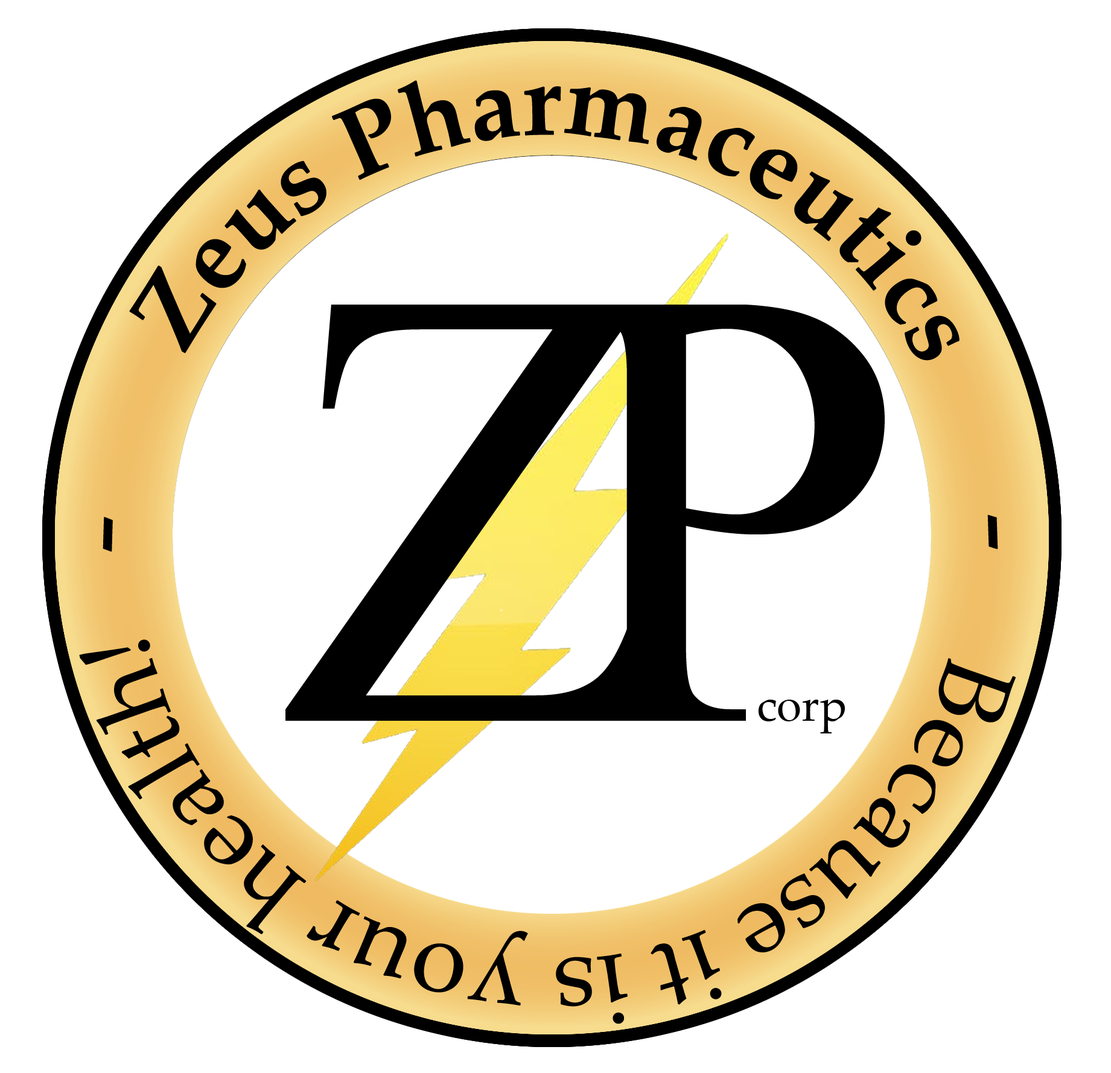
<style>
.page{position:relative;width:1111px;height:1073px;background:#ffffff}
.page>*{position:absolute;margin:0}
.t1{font:100.6px "PalatinoLinotype-Roman";color:#000000}
.t2{font:100.6px "PalatinoLinotype-Bold";color:#000000}
.t3{font:120.7px "PalatinoLinotype-Roman";color:#000000}
.t4{font:45.3px "PalatinoLinotype-Roman";color:#000000}
</style>
<div class="page">
<p class="t1" style="left:79px;top:80px;width:937px;height:945px"><span class="t2">  Zeus Pharmaceutics      </span><span class="t3">-    </span>Because it is your health!   <span class="t3">-</span></p>
<p class="t4" style="left:758px;top:700px;width:87px;height:34px">corp</p>
</div>
